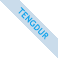
<style>
.page{position:relative;width:58px;height:58px;background:#ffffff}
.page>*{position:absolute;margin:0}
.t1{font:9px "TrebuchetMS-Bold";color:#12a3eb}
</style>
<div class="page">
<p class="t1" style="left:18px;top:7px;width:31px;height:33px;rotate:45deg">TENGDUR</p>
</div>
